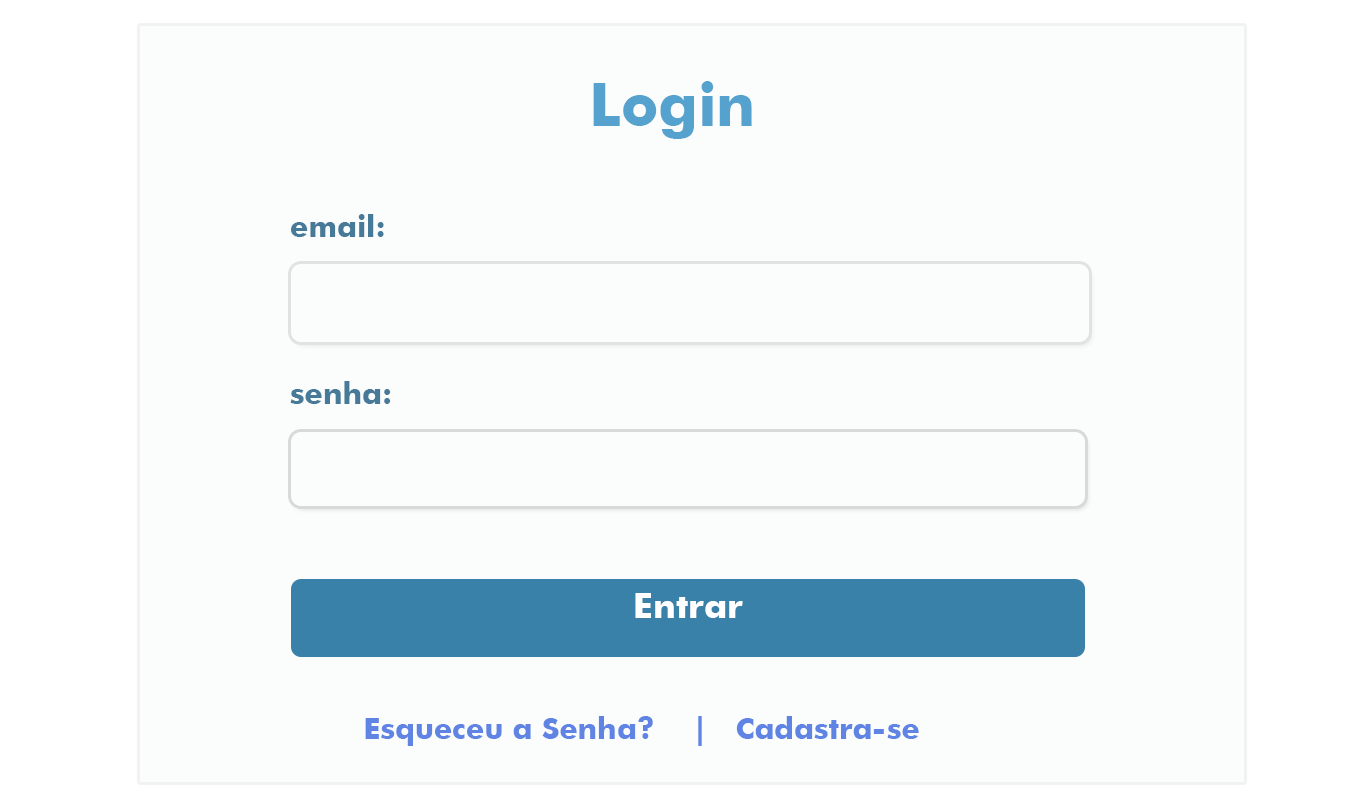
<style>
.page{position:relative;width:1360px;height:800px;background:#fbfdfd}
.page>*{position:absolute;margin:0}
.t1{font:60px "FuturaBT-Bold";color:#56a2ce}
.t2{font:30px "FuturaBT-Bold";color:#467a98}
.t3{font:35px "FuturaBT-Bold";color:#ffffff}
.t4{font:30px "FuturaBT-Bold";color:#5f84e4}
</style>
<div class="page">
<p class="t1" style="left:593px;top:81px;width:159px;height:58px">Login</p>
<p class="t2" style="left:291px;top:214px;width:93px;height:23px">email:</p>
<p class="t2" style="left:290px;top:381px;width:101px;height:23px">senha:</p>
<p class="t3" style="left:635px;top:593px;width:108px;height:25px">Entrar</p>
<p class="t4" style="left:365px;top:716px;width:554px;height:30px">Esqueceu a Senha?    |   Cadastra-se</p>
</div>
